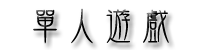
<style>
.page{position:relative;width:200px;height:50px;background:#ffffff}
.page>*{position:absolute;margin:0}
.t1{font:36px "DFJinWen-W3-WIN-BF";color:#000000;font-weight:bold}
</style>
<div class="page">
<p class="t1" style="left:33px;top:8px;width:136px;height:36px">單人遊戲</p>
</div>
